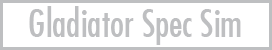
<style>
.page{position:relative;width:272px;height:50px;background:#ffffff}
.page>*{position:absolute;margin:0}
.t1{font:37.3px "FuturaCondensed";color:#bebfc1}
</style>
<div class="page">
<p class="t1" style="left:29px;top:6px;width:212px;height:39px">Gladiator Spec Sim</p>
</div>
